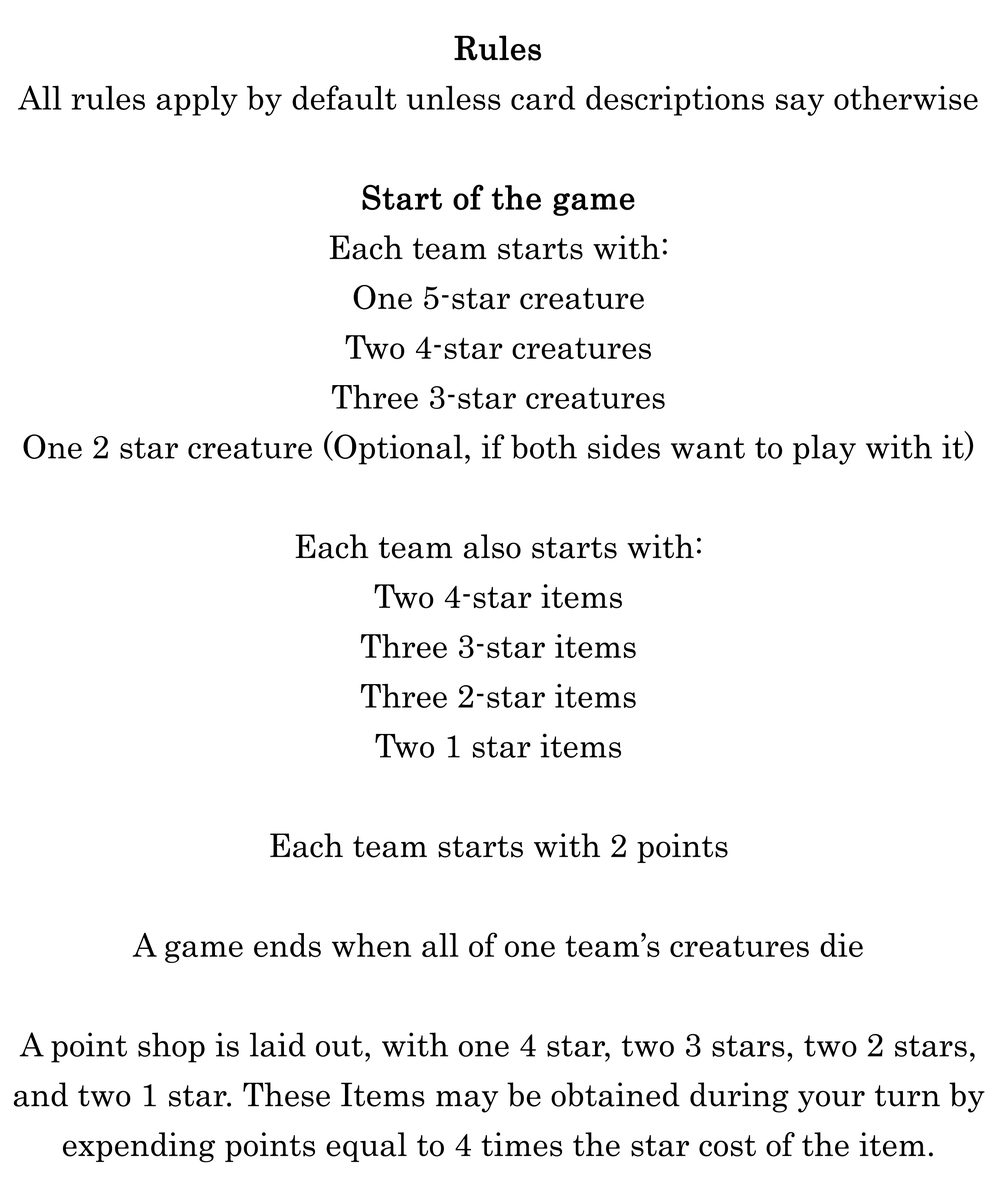
<style>
.page{position:relative;width:997px;height:1196px;background:#ffffff}
.page>*{position:absolute;margin:0}
.t1{font:55.4px/49.8px "Century";color:#000000}
.t2{font:55.4px/49.8px "Century";color:#000000;font-weight:bold}
</style>
<div class="page">
<p class="t1" style="left:14px;top:35px;width:970px;height:1128px;text-align:center"><span class="t2">Rules<br></span>All rules apply by default unless card descriptions say otherwise<br><br><span class="t2">Start of the game<br></span>Each team starts with:<br>One 5-star creature<br>Two 4-star creatures<br>Three 3-star creatures<br>One 2 star creature (Optional, if both sides want to play with it)<br><br>Each team also starts with:<br>Two 4-star items<br>Three 3-star items<br>Three 2-star items<br>Two 1 star items<br><br>Each team starts with 2 points<br><br>A game ends when all of one team’s creatures die<br><br>A point shop is laid out, with one 4 star, two 3 stars, two 2 stars, and two 1 star. These Items may be obtained during your turn by expending points equal to 4 times the star cost of the item.</p>
</div>
